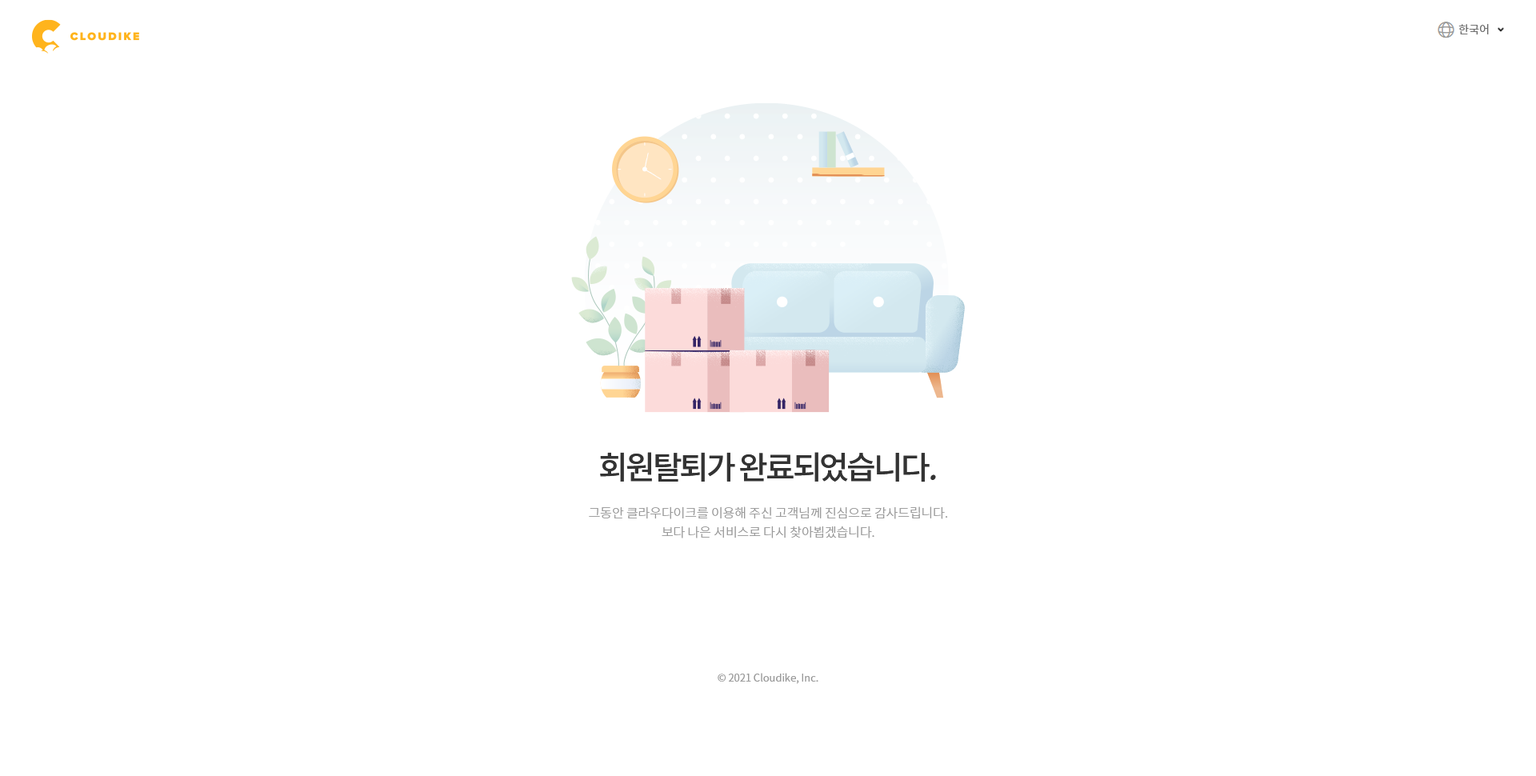
<style>
.page{position:relative;width:1536px;height:776px;background:#ffffff}
.page>*{position:absolute;margin:0}
.t1{font:11.2px "NotoSansCJKkr-DemiLight";color:#666666}
.t2{font:32px "NotoSansCJKkr-Medium";letter-spacing:-0.075em;color:#333333}
.t3{font:32px "NotoSansCJKkr-Medium";letter-spacing:-0.075em;color:#333333;font-style:italic}
.t4{font:12.8px/19.2px "NotoSansCJKkr-Light";letter-spacing:-0.005em;color:#999999}
.t5{font:10.4px "NotoSansCJKkr-DemiLight";color:#999999}
</style>
<div class="page">
<p class="t1" style="left:1459px;top:24px;width:30px;height:11px">한국어</p>
<p class="t2" style="left:600px;top:452px;width:336px;height:31px">회원탈퇴가 완료되었습니다<span class="t3">.</span></p>
<p class="t4" style="left:589px;top:507px;width:359px;height:32px;text-align:center">그동안 클라우다이크를 이용해 주신 고객님께 진심으로 감사드립니다.<br>보다 나은 서비스로 다시 찾아뵙겠습니다.</p>
<p class="t5" style="left:718px;top:673px;width:101px;height:11px">© 2021 Cloudike, Inc.</p>
</div>
